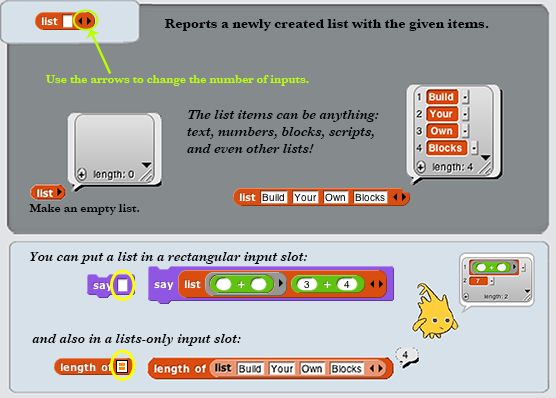
<style>
.page{position:relative;width:556px;height:398px;background:#858a8c}
.page>*{position:absolute;margin:0}
.t1{font:14px "Baskerville-Bold";color:#000000}
.t2{font:12px "Baskerville-SemiBold";color:#b9ff00}
.t3{font:14px "Baskerville-SemiBoldItalic";color:#000000}
.t4{font:12px "Baskerville-SemiBold";color:#000000}
</style>
<div class="page">
<p class="t1" style="left:165px;top:19px;width:324px;height:12px">Reports a newly created list with the given items.</p>
<p class="t2" style="left:46px;top:75px;width:263px;height:11px">Use the arrows to change the number of inputs.</p>
<p class="t3" style="left:187px;top:110px;width:192px;height:43px">The list items can be anything:<br>text, numbers, blocks, scripts,<br>and even other lists!</p>
<p class="t4" style="left:29px;top:204px;width:111px;height:11px">Make an empty list.</p>
<p class="t3" style="left:30px;top:252px;width:277px;height:12px">You can put a list in a rectangular input slot:</p>
<p class="t3" style="left:32px;top:334px;width:209px;height:12px">and also in a lists-only input slot:</p>
</div>
